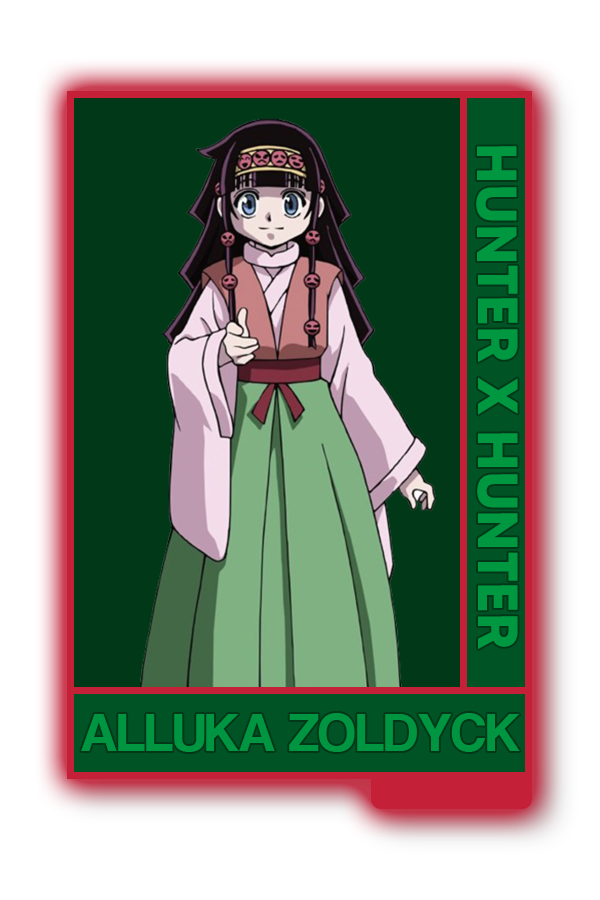
<style>
.page{position:relative;width:600px;height:900px;background:#003818}
.page>*{position:absolute;margin:0}
.t1{font:56.5px "MADETOMMY-Bold";color:#009741}
.t2{font:55.9px "CoolveticaRg-Regular";color:#009641}
</style>
<div class="page">
<p class="t1" style="left:476px;top:146px;width:42px;height:503px;rotate:90deg">HUNTER X HUNTER</p>
<p class="t2" style="left:81px;top:713px;width:439px;height:39px">ALLUKA ZOLDYCK</p>
</div>
